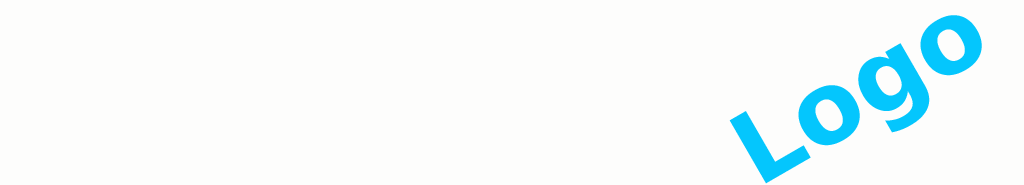
<style>
.page{position:relative;width:1024px;height:185px;background:#fdfdfc}
.page>*{position:absolute;margin:0}
.t1{font:100px "DejaVuSans-Bold";color:#04c6fd}
</style>
<div class="page">
<p class="t1" style="left:729px;top:15px;width:253px;height:169px;rotate:-30deg">Logo</p>
</div>
